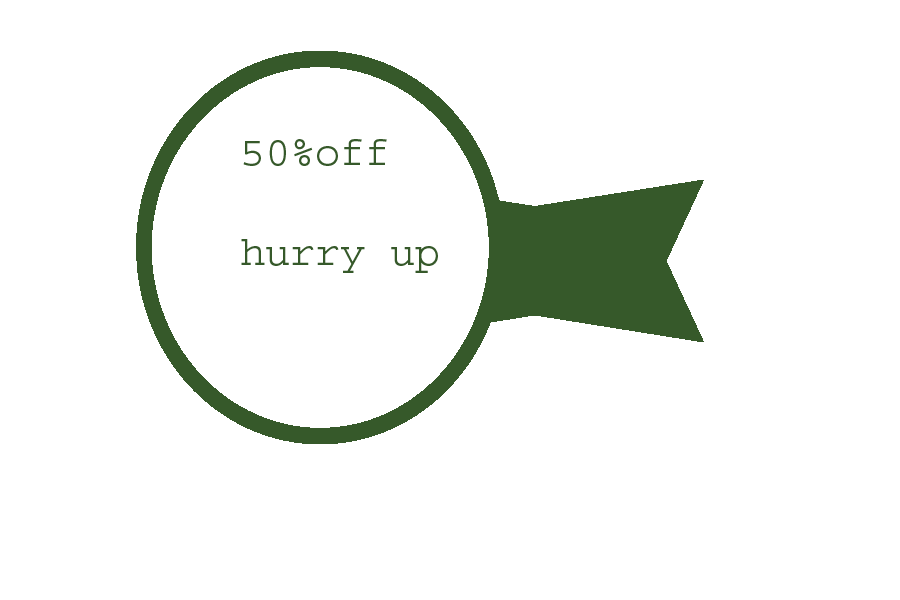
<style>
.page{position:relative;width:900px;height:600px;background:#ffffff}
.page>*{position:absolute;margin:0}
.t1{font:41.7px "Courier";color:#36592a}
</style>
<div class="page">
<p class="t1" style="left:241px;top:139px;width:197px;height:134px">50%off<br><br>hurry up</p>
</div>
